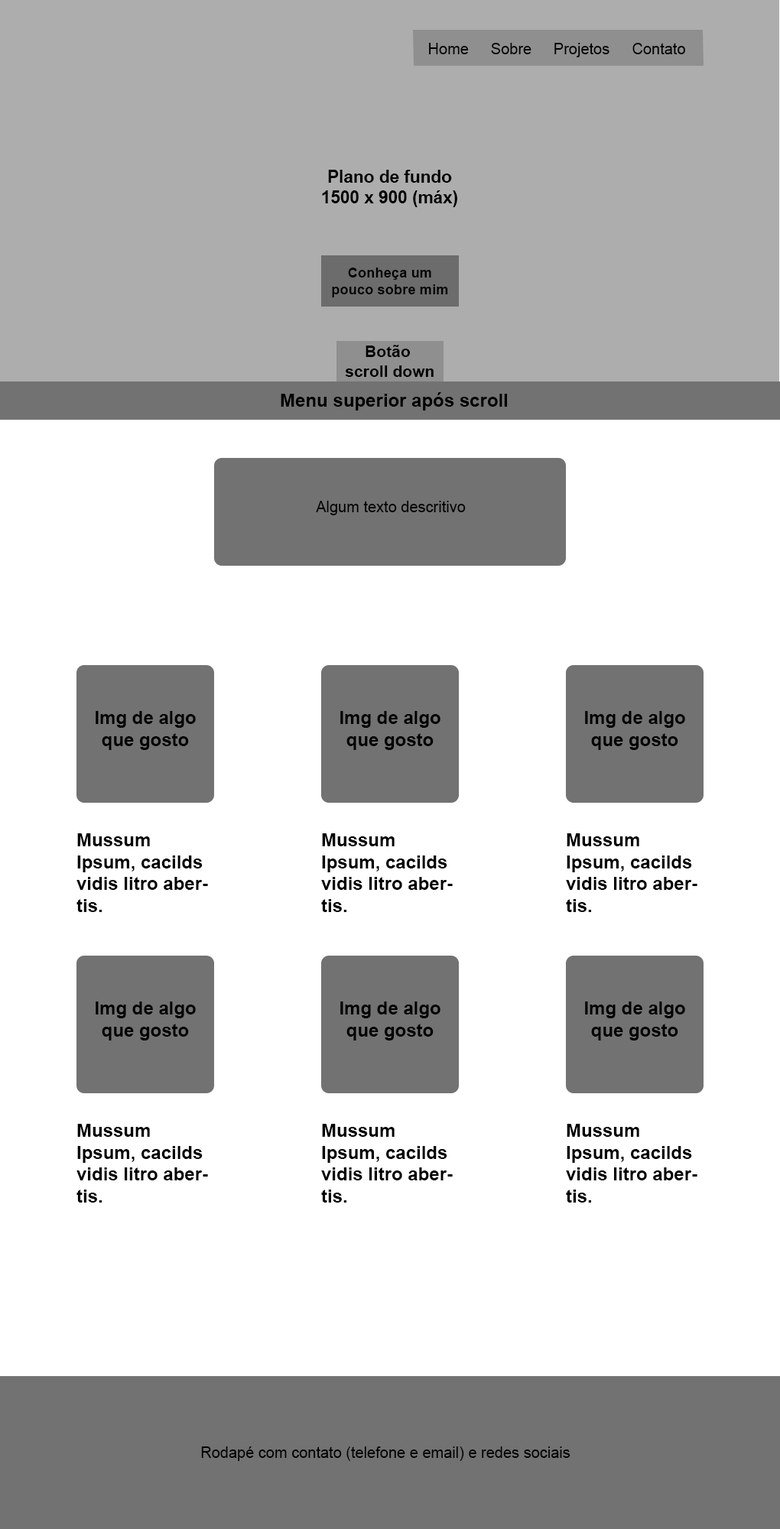
<style>
.page{position:relative;width:780px;height:1529px;background:#ffffff}
.page>*{position:absolute;margin:0}
.t1{font:15.3px "ArialMT";color:#000000}
.t2{font:17.2px "Arial-BoldMT";color:#000000}
.t3{font:14.1px "Arial-BoldMT";color:#000000}
.t4{font:16.1px "Arial-BoldMT";color:#000000}
.t5{font:18.3px "Arial-BoldMT";color:#000000}
</style>
<div class="page">
<p class="t1" style="left:429px;top:43px;width:40px;height:11px">Home</p>
<p class="t1" style="left:491px;top:43px;width:40px;height:11px">Sobre</p>
<p class="t1" style="left:554px;top:43px;width:55px;height:14px">Projetos</p>
<p class="t1" style="left:632px;top:43px;width:53px;height:11px">Contato</p>
<p class="t2" style="left:322px;top:170px;width:135px;height:37px;text-align:center">Plano de fundo<br>1500 x 900 (máx)</p>
<p class="t3" style="left:332px;top:268px;width:116px;height:29px;text-align:center">Conheça um <br>pouco sobre mim</p>
<p class="t4" style="left:345px;top:345px;width:88px;height:32px;text-align:center">Botão<br> scroll down</p>
<p class="t5" style="left:281px;top:392px;width:226px;height:19px">Menu superior após scroll</p>
<p class="t1" style="left:316px;top:501px;width:150px;height:14px">Algum texto descritivo</p>
<p class="t5" style="left:96px;top:711px;width:100px;height:39px;text-align:center">Img de algo que gosto</p>
<p class="t5" style="left:340px;top:711px;width:100px;height:39px;text-align:center">Img de algo que gosto</p>
<p class="t5" style="left:585px;top:711px;width:100px;height:39px;text-align:center">Img de algo que gosto</p>
<p class="t5" style="left:76px;top:833px;width:132px;height:79px">Mussum Ipsum, cacilds vidis litro abertis.</p>
<p class="t5" style="left:321px;top:833px;width:132px;height:79px">Mussum Ipsum, cacilds vidis litro abertis.</p>
<p class="t5" style="left:566px;top:833px;width:131px;height:79px">Mussum Ipsum, cacilds vidis litro abertis.</p>
<p class="t5" style="left:96px;top:1002px;width:100px;height:39px;text-align:center">Img de algo que gosto</p>
<p class="t5" style="left:340px;top:1002px;width:100px;height:39px;text-align:center">Img de algo que gosto</p>
<p class="t5" style="left:585px;top:1002px;width:100px;height:39px;text-align:center">Img de algo que gosto</p>
<p class="t5" style="left:76px;top:1124px;width:132px;height:79px">Mussum Ipsum, cacilds vidis litro abertis.</p>
<p class="t5" style="left:321px;top:1124px;width:132px;height:79px">Mussum Ipsum, cacilds vidis litro abertis.</p>
<p class="t5" style="left:566px;top:1124px;width:131px;height:79px">Mussum Ipsum, cacilds vidis litro abertis.</p>
<p class="t1" style="left:201px;top:1447px;width:369px;height:14px">Rodapé com contato (telefone e email) e redes sociais</p>
</div>
